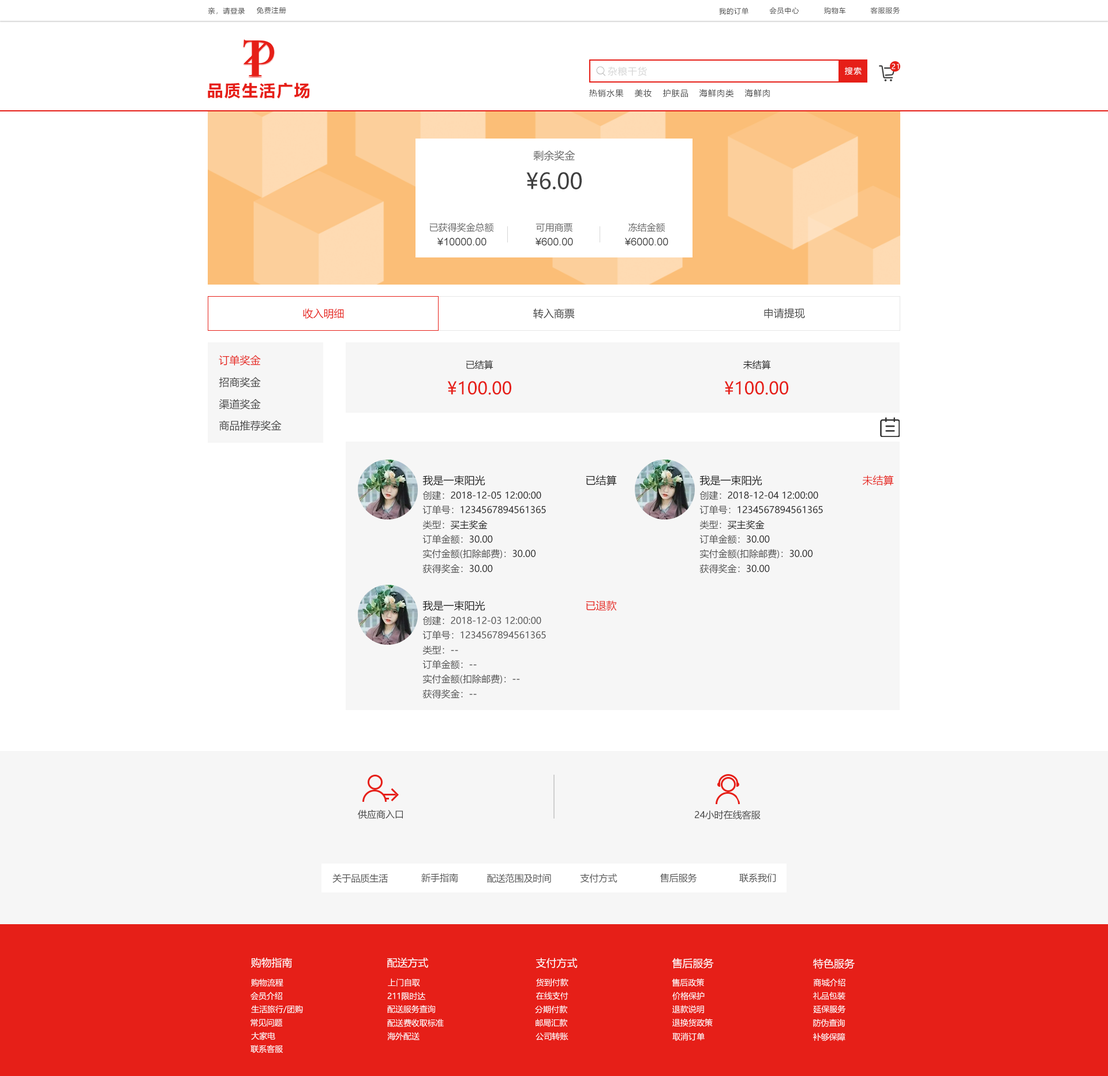
<style>
.page{position:relative;width:1108px;height:1076px;background:#ffffff}
.page>*{position:absolute;margin:0}
.t1{font:6.9px "MicrosoftYaHei";letter-spacing:0.08em;color:#404040}
.t2{font:6.9px "MicrosoftYaHei";letter-spacing:0.08em;color:#ffffff}
.t3{font:9.2px "MicrosoftYaHei";letter-spacing:0.08em;color:#d6d6d6}
.t4{font:8.1px "MicrosoftYaHei";letter-spacing:0.08em;color:#ffffff}
.t5{font:16.2px "MicrosoftYaHei-Bold";letter-spacing:0.08em;color:#e61f18}
.t6{font:8.1px "MicrosoftYaHei";letter-spacing:0.08em;color:#404040}
.t7{font:10.4px "MicrosoftYaHei";color:#666666}
.t8{font:21.9px "MicrosoftYaHei";color:#404040}
.t9{font:9.2px "MicrosoftYaHei";color:#666666}
.t10{font:10.4px "ArialMT";color:#404040}
.t11{font:10.4px "MicrosoftYaHei";color:#e61f18}
.t12{font:10.4px "MicrosoftYaHei";color:#404040}
.t13{font:9.2px "MicrosoftYaHei";color:#202020}
.t14{font:17.3px "MicrosoftYaHei";color:#e61f18}
.t15{font:10.4px "MicrosoftYaHei";color:#202020}
.t16{font:9.2px "MicrosoftYaHei";color:#505050}
.t17{font:9.2px "MicrosoftYaHei";color:#404040}
.t18{font:10.4px "MicrosoftYaHei";color:#ffffff}
.t19{font:8.1px "MicrosoftYaHei";color:#ffffff}
</style>
<div class="page">
<p class="t1" style="left:208px;top:7px;width:37px;height:7px">亲，请登录</p>
<p class="t1" style="left:256px;top:7px;width:30px;height:7px">免费注册</p>
<p class="t1" style="left:719px;top:8px;width:30px;height:6px">我的订单</p>
<p class="t1" style="left:769px;top:7px;width:30px;height:7px">会员中心</p>
<p class="t1" style="left:824px;top:7px;width:22px;height:7px">购物车</p>
<p class="t1" style="left:870px;top:7px;width:30px;height:7px">客服服务</p>
<p class="t2" style="left:892px;top:63px;width:7px;height:6px">21</p>
<p class="t3" style="left:608px;top:66px;width:39px;height:10px">杂粮干货</p>
<p class="t4" style="left:845px;top:67px;width:17px;height:8px">搜索</p>
<p class="t5" style="left:208px;top:83px;width:102px;height:16px">品质生活广场</p>
<p class="t6" style="left:589px;top:89px;width:35px;height:9px">热销水果</p>
<p class="t6" style="left:635px;top:89px;width:17px;height:8px">美妆</p>
<p class="t6" style="left:663px;top:89px;width:25px;height:9px">护肤品</p>
<p class="t6" style="left:699px;top:89px;width:35px;height:9px">海鲜肉类</p>
<p class="t6" style="left:745px;top:89px;width:25px;height:9px">海鲜肉</p>
<p class="t7" style="left:533px;top:150px;width:42px;height:11px">剩余奖金</p>
<p class="t8" style="left:526px;top:172px;width:56px;height:17px">¥6.00</p>
<p class="t9" style="left:429px;top:223px;width:65px;height:9px">已获得奖金总额</p>
<p class="t9" style="left:536px;top:223px;width:37px;height:9px">可用商票</p>
<p class="t9" style="left:629px;top:223px;width:37px;height:9px">冻结金额</p>
<p class="t10" style="left:438px;top:238px;width:49px;height:8px">¥10000.00</p>
<p class="t10" style="left:536px;top:238px;width:37px;height:8px">¥600.00</p>
<p class="t10" style="left:625px;top:238px;width:43px;height:8px">¥6000.00</p>
<p class="t11" style="left:303px;top:308px;width:41px;height:11px">收入明细</p>
<p class="t12" style="left:533px;top:308px;width:42px;height:11px">转入商票</p>
<p class="t12" style="left:764px;top:308px;width:41px;height:11px">申请提现</p>
<p class="t11" style="left:219px;top:355px;width:42px;height:10px">订单奖金</p>
<p class="t13" style="left:466px;top:360px;width:28px;height:9px">已结算</p>
<p class="t13" style="left:743px;top:360px;width:28px;height:9px">未结算</p>
<p class="t12" style="left:219px;top:377px;width:42px;height:10px">招商奖金</p>
<p class="t14" style="left:447px;top:381px;width:64px;height:14px">¥100.00</p>
<p class="t14" style="left:724px;top:381px;width:64px;height:14px">¥100.00</p>
<p class="t12" style="left:219px;top:399px;width:42px;height:10px">渠道奖金</p>
<p class="t12" style="left:219px;top:420px;width:63px;height:11px">商品推荐奖金</p>
<p class="t15" style="left:423px;top:475px;width:62px;height:10px">我是一束阳光</p>
<p class="t15" style="left:586px;top:475px;width:31px;height:10px">已结算</p>
<p class="t15" style="left:700px;top:475px;width:63px;height:10px">我是一束阳光</p>
<p class="t11" style="left:862px;top:475px;width:32px;height:10px">未结算</p>
<p class="t13" style="left:423px;top:491px;width:118px;height:9px"><span class="t16">创建：</span>2018-12-05 12:00:00</p>
<p class="t13" style="left:700px;top:491px;width:119px;height:9px"><span class="t16">创建：</span>2018-12-04 12:00:00</p>
<p class="t13" style="left:423px;top:505px;width:123px;height:9px"><span class="t16">订单号：</span>1234567894561365</p>
<p class="t13" style="left:700px;top:505px;width:123px;height:9px"><span class="t16">订单号：</span>1234567894561365</p>
<p class="t13" style="left:423px;top:520px;width:65px;height:9px"><span class="t16">类型：</span>买主奖金</p>
<p class="t13" style="left:700px;top:520px;width:65px;height:9px"><span class="t16">类型：</span>买主奖金</p>
<p class="t16" style="left:423px;top:535px;width:70px;height:9px">订单金额：<span class="t13">30.00</span></p>
<p class="t16" style="left:700px;top:535px;width:70px;height:9px">订单金额：<span class="t13">30.00</span></p>
<p class="t16" style="left:423px;top:549px;width:113px;height:10px">实付金额(扣除邮费)：<span class="t13">30.00</span></p>
<p class="t16" style="left:700px;top:549px;width:113px;height:10px">实付金额(扣除邮费)：<span class="t13">30.00</span></p>
<p class="t16" style="left:423px;top:564px;width:70px;height:9px">获得奖金：<span class="t13">30.00</span></p>
<p class="t16" style="left:700px;top:564px;width:70px;height:9px">获得奖金：<span class="t13">30.00</span></p>
<p class="t15" style="left:423px;top:600px;width:62px;height:11px">我是一束阳光</p>
<p class="t11" style="left:586px;top:600px;width:31px;height:11px">已退款</p>
<p class="t16" style="left:423px;top:616px;width:118px;height:9px">创建：2018-12-03 12:00:00</p>
<p class="t16" style="left:423px;top:630px;width:123px;height:10px">订单号：1234567894561365</p>
<p class="t16" style="left:423px;top:645px;width:35px;height:10px">类型：<span class="t13">--</span></p>
<p class="t16" style="left:423px;top:660px;width:54px;height:10px">订单金额：<span class="t13">--</span></p>
<p class="t16" style="left:423px;top:674px;width:97px;height:10px">实付金额(扣除邮费)：<span class="t13">--</span></p>
<p class="t16" style="left:423px;top:689px;width:54px;height:9px">获得奖金：<span class="t13">--</span></p>
<p class="t17" style="left:358px;top:809px;width:45px;height:10px">供应商入口</p>
<p class="t17" style="left:695px;top:810px;width:66px;height:10px">24小时在线客服</p>
<p class="t16" style="left:332px;top:873px;width:56px;height:10px">关于品质生活</p>
<p class="t16" style="left:421px;top:873px;width:37px;height:10px">新手指南</p>
<p class="t16" style="left:487px;top:873px;width:64px;height:10px">配送范围及时间</p>
<p class="t16" style="left:580px;top:873px;width:38px;height:10px">支付方式</p>
<p class="t16" style="left:660px;top:873px;width:37px;height:10px">售后服务</p>
<p class="t16" style="left:739px;top:873px;width:37px;height:10px">联系我们</p>
<p class="t18" style="left:251px;top:958px;width:41px;height:10px">购物指南</p>
<p class="t18" style="left:387px;top:958px;width:41px;height:10px">配送方式</p>
<p class="t18" style="left:536px;top:958px;width:42px;height:10px">支付方式</p>
<p class="t18" style="left:672px;top:958px;width:42px;height:11px">售后服务</p>
<p class="t18" style="left:813px;top:958px;width:42px;height:11px">特色服务</p>
<p class="t19" style="left:251px;top:978px;width:32px;height:8px">购物流程</p>
<p class="t19" style="left:388px;top:978px;width:32px;height:8px">上门自取</p>
<p class="t19" style="left:536px;top:978px;width:33px;height:8px">货到付款</p>
<p class="t19" style="left:672px;top:978px;width:32px;height:8px">售后政策</p>
<p class="t19" style="left:813px;top:978px;width:33px;height:8px">商城介绍</p>
<p class="t19" style="left:251px;top:992px;width:31px;height:8px">会员介绍</p>
<p class="t19" style="left:387px;top:992px;width:39px;height:8px">211限时达</p>
<p class="t19" style="left:536px;top:992px;width:33px;height:8px">在线支付</p>
<p class="t19" style="left:672px;top:992px;width:33px;height:8px">价格保护</p>
<p class="t19" style="left:813px;top:992px;width:33px;height:8px">礼品包装</p>
<p class="t19" style="left:251px;top:1005px;width:52px;height:8px">生活旅行/团购</p>
<p class="t19" style="left:387px;top:1005px;width:48px;height:8px">配送服务查询</p>
<p class="t19" style="left:535px;top:1005px;width:32px;height:9px">分期付款</p>
<p class="t19" style="left:672px;top:1005px;width:32px;height:9px">退款说明</p>
<p class="t19" style="left:813px;top:1005px;width:33px;height:8px">延保服务</p>
<p class="t19" style="left:251px;top:1019px;width:32px;height:8px">常见问题</p>
<p class="t19" style="left:387px;top:1019px;width:57px;height:8px">配送费收取标准</p>
<p class="t19" style="left:536px;top:1019px;width:31px;height:8px">邮局汇款</p>
<p class="t19" style="left:672px;top:1018px;width:41px;height:9px">退换货政策</p>
<p class="t19" style="left:813px;top:1019px;width:32px;height:8px">防伪查询</p>
<p class="t19" style="left:251px;top:1031px;width:24px;height:9px">大家电</p>
<p class="t19" style="left:387px;top:1032px;width:33px;height:8px">海外配送</p>
<p class="t19" style="left:536px;top:1032px;width:33px;height:9px">公司转账</p>
<p class="t19" style="left:672px;top:1033px;width:33px;height:8px">取消订单</p>
<p class="t19" style="left:813px;top:1033px;width:33px;height:8px">补够保障</p>
<p class="t19" style="left:251px;top:1045px;width:32px;height:8px">联系客服</p>
</div>
